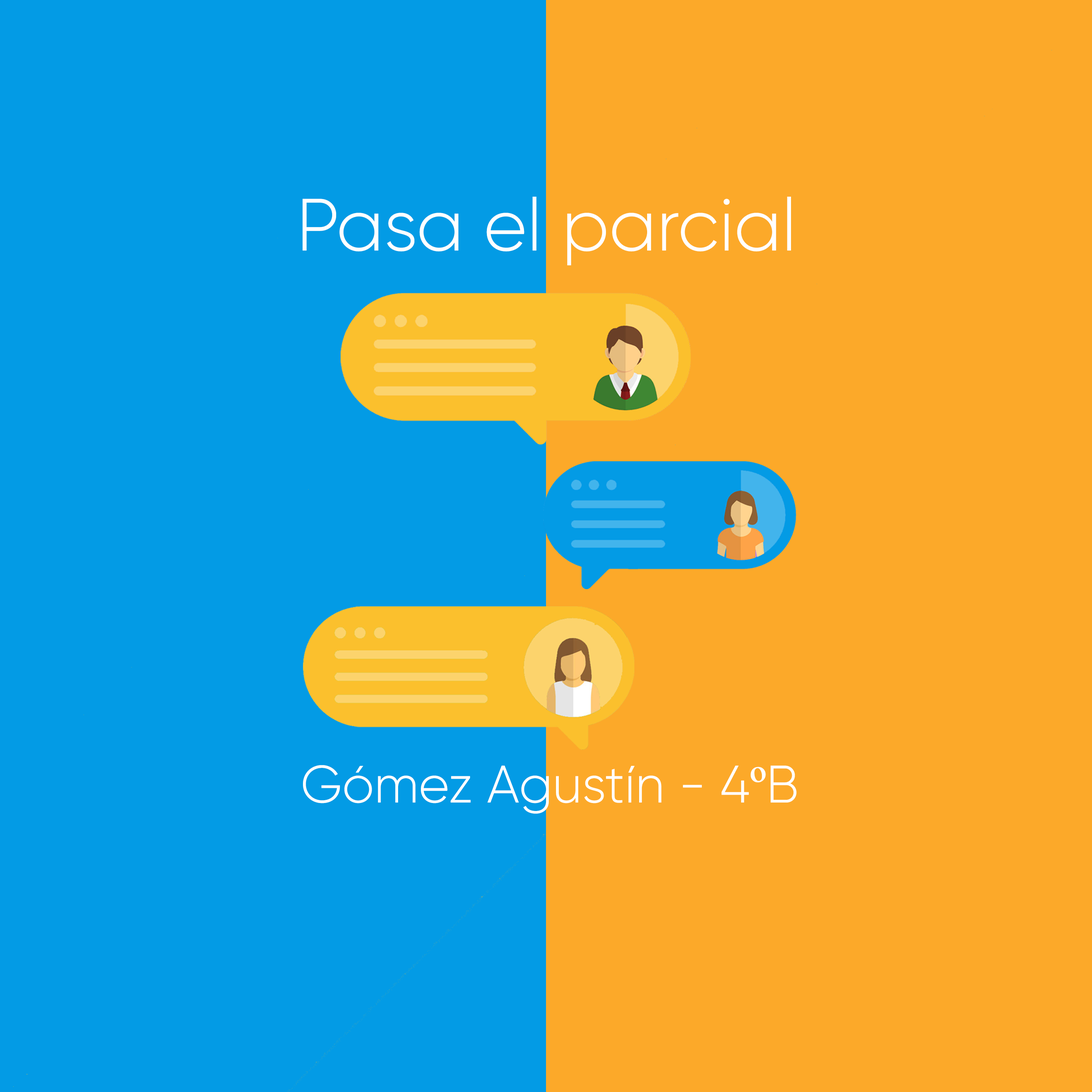
<style>
.page{position:relative;width:1092px;height:1092px;background:#039be5}
.page>*{position:absolute;margin:0}
.t1{font:73.7px "Gilroy-Light";color:#ffffff}
.t2{font:52.5px "Gilroy-Light";color:#ffffff}
.t3{font:52.5px "TimesNewRomanPSMT";color:#ffffff}
</style>
<div class="page">
<p class="t1" style="left:303px;top:197px;width:488px;height:68px">Pasa el parcial</p>
<p class="t2" style="left:303px;top:765px;width:494px;height:49px">Gómez Agustín - 4<span class="t3">º</span>B</p>
</div>
